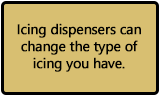
<style>
.page{position:relative;width:160px;height:96px;background:#d8bf71}
.page>*{position:absolute;margin:0}
.t1{font:14px "SegoeUI";letter-spacing:-0.025em;color:#010101;font-weight:bold}
</style>
<div class="page">
<p class="t1" style="left:17px;top:23px;width:124px;height:49px;text-align:center">Icing dispensers can change the type of icing you have.</p>
</div>
